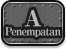
<style>
.page{position:relative;width:66px;height:49px}
.page>*{position:absolute;margin:0}
.t1{font:11px/9px "RyuminPro-ExBold";letter-spacing:-0.08em;color:#b8b8b8}
.t2{font:22px/9px "RyuminPro-ExHeavy";letter-spacing:-0.08em;color:#b8b8b8}
</style>
<div class="page">
<p class="t1" style="left:5px;top:9px;width:56px;height:28px;text-align:center"><span class="t2">A<br></span>Penempatan</p>
</div>
